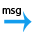
<style>
.page{position:relative;width:32px;height:32px;background:#ffffff}
.page>*{position:absolute;margin:0}
.t1{font:11px "MyriadPro-Regular";color:#000000}
</style>
<div class="page">
<p class="t1" style="left:2px;top:8px;width:19px;height:8px">msg</p>
</div>
